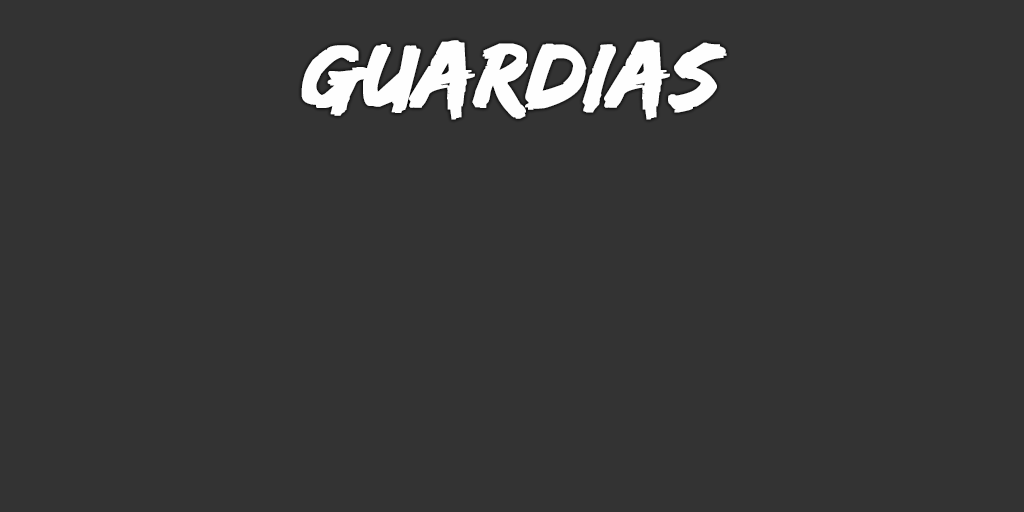
<style>
.page{position:relative;width:1024px;height:512px;background:#333333}
.page>*{position:absolute;margin:0}
.t1{font:94px "EdoSZ";color:#fefefe;font-weight:bold;font-style:italic;scale:1.04 1}
</style>
<div class="page">
<p class="t1" style="left:301px;top:40px;width:426px;height:80px">guardias</p>
</div>
